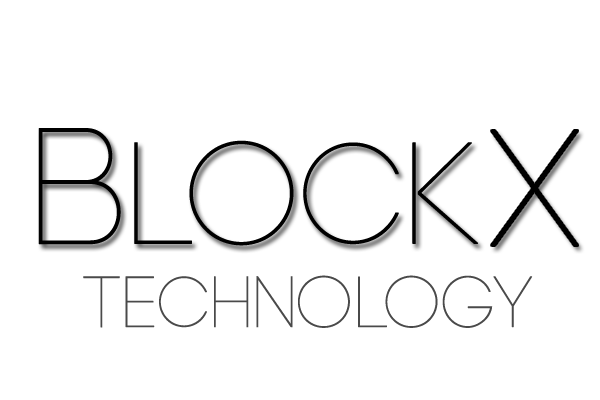
<style>
.page{position:relative;width:600px;height:400px;background:#ffffff}
.page>*{position:absolute;margin:0}
.t1{font:144px "Code-Light";color:#000000;font-weight:bold}
.t2{font:164px "Code-Light";color:#000000;font-weight:bold}
.t3{font:72px "Code-Light";color:#4a4a4a;font-weight:bold}
</style>
<div class="page">
<p class="t1" style="left:38px;top:128px;width:440px;height:118px"><span class="t2">B</span>LOCK</p>
<p class="t2" style="left:491px;top:130px;width:87px;height:116px">X</p>
<p class="t3" style="left:83px;top:275px;width:450px;height:53px">Technology</p>
</div>
